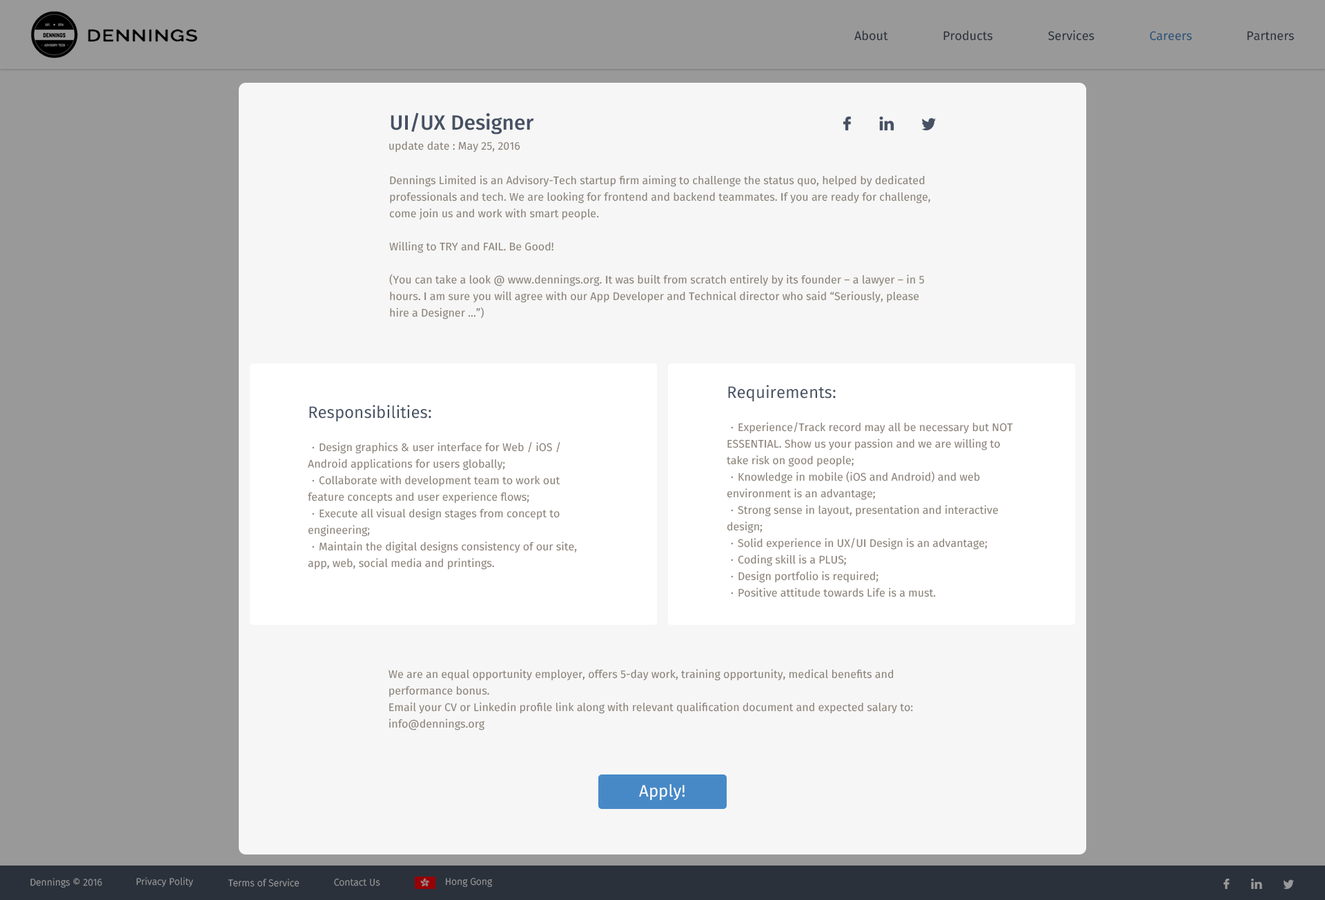
<style>
.page{position:relative;width:1325px;height:900px;background:#999999}
.page>*{position:absolute;margin:0}
.t1{font:12.4px "FiraSans-Regular";color:#2a313b}
.t2{font:12.4px "FiraSans-Regular";color:#2b5277}
.t3{font:20.7px "FiraSans-Medium";color:#465163}
.t4{font:11px "FiraSans-Regular";color:#898176}
.t5{font:11px/16.6px "FiraSans-Regular";color:#898176}
.t6{font:16.6px/24.8px "FiraSans-Regular";color:#465163}
.t7{font:11px/16.6px "DFKaiShu-SB-Estd-BF";color:#898176}
.t8{font:16.6px "FiraSans-Regular";color:#ffffff}
.t9{font:9.7px "FiraSans-Light"}
.t10{font:9.7px "FiraSans-Light";color:#999999}
</style>
<div class="page">
<p class="t1" style="left:1048px;top:30px;width:46px;height:11px">Services</p>
<p class="t1" style="left:854px;top:30px;width:34px;height:11px">About</p>
<p class="t1" style="left:943px;top:30px;width:50px;height:11px">Products</p>
<p class="t2" style="left:1149px;top:31px;width:42px;height:10px">Careers</p>
<p class="t1" style="left:1247px;top:31px;width:46px;height:10px">Partners</p>
<p class="t3" style="left:390px;top:112px;width:144px;height:23px">UI/UX Designer</p>
<p class="t4" style="left:389px;top:141px;width:131px;height:11px">update date : May 25, 2016</p>
<p class="t5" style="left:389px;top:175px;width:541px;height:144px">Dennings Limited is an Advisory-Tech startup firm aiming to challenge the status quo, helped by dedicated professionals and tech. We are looking for frontend and backend teammates. If you are ready for challenge, come join us and work with smart people.<br><br>Willing to TRY and FAIL. Be Good!<br><br>(You can take a look @ www.dennings.org. It was built from scratch entirely by its founder – a lawyer – in 5 hours. I am sure you will agree with our App Developer and Technical director who said “Seriously, please hire a Designer …”)</p>
<p class="t5" style="left:726px;top:385px;width:287px;height:212px"><span class="t6">Requirements:<br><br></span><span class="t7">．</span>Experience/Track record may all be necessary but NOT ESSENTIAL. Show us your passion and we are willing to take risk on good people;<br><span class="t7">．</span>Knowledge in mobile (iOS and Android) and web environment is an advantage;<br><span class="t7">．</span>Strong sense in layout, presentation and interactive design;<br><span class="t7">．</span>Solid experience in UX/UI Design is an advantage;<br><span class="t7">．</span>Coding skill is a PLUS;<br><span class="t7">．</span>Design portfolio is required;<br><span class="t7">．</span>Positive attitude towards Life is a must.</p>
<p class="t5" style="left:308px;top:405px;width:269px;height:165px"><span class="t6">Responsibilities:<br><br></span><span class="t7">．</span>Design graphics &amp; user interface for Web / iOS / Android applications for users globally;<br><span class="t7">．</span>Collaborate with development team to work out feature concepts and user experience flows;<br><span class="t7">．</span>Execute all visual design stages from concept to engineering;<br><span class="t7">．</span>Maintain the digital designs consistency of our site, app, web, social media and printings.</p>
<p class="t5" style="left:388px;top:669px;width:525px;height:62px">We are an equal opportunity employer, offers 5-day work, training opportunity, medical benefits and performance bonus.<br>Email your CV or Linkedin profile link along with relevant qualification document and expected salary to: info@dennings.org</p>
<p class="t8" style="left:639px;top:784px;width:45px;height:16px">Apply!</p>
<p class="t9" style="left:30px;top:878px;width:72px;height:10px">Dennings © 2016</p>
<p class="t10" style="left:137px;top:878px;width:56px;height:9px">Privacy Polity</p>
<p class="t9" style="left:228px;top:879px;width:71px;height:8px">Terms of Service</p>
<p class="t9" style="left:334px;top:879px;width:46px;height:7px">Contact Us</p>
<p class="t9" style="left:446px;top:878px;width:46px;height:9px">Hong Gong</p>
</div>
